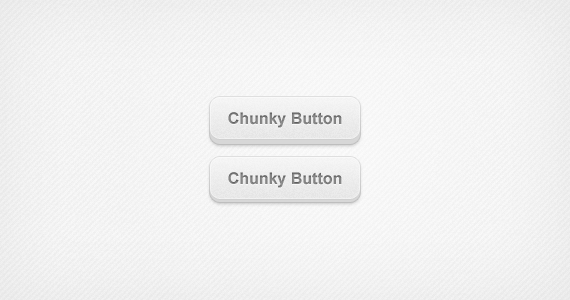
<style>
.page{position:relative;width:570px;height:300px}
.page>*{position:absolute;margin:0}
.t1{font:16px "Arial-BoldMT";color:#959595}
</style>
<div class="page">
<p class="t1" style="left:228px;top:112px;width:114px;height:16px">Chunky Button</p>
<p class="t1" style="left:228px;top:172px;width:114px;height:16px">Chunky Button</p>
</div>
